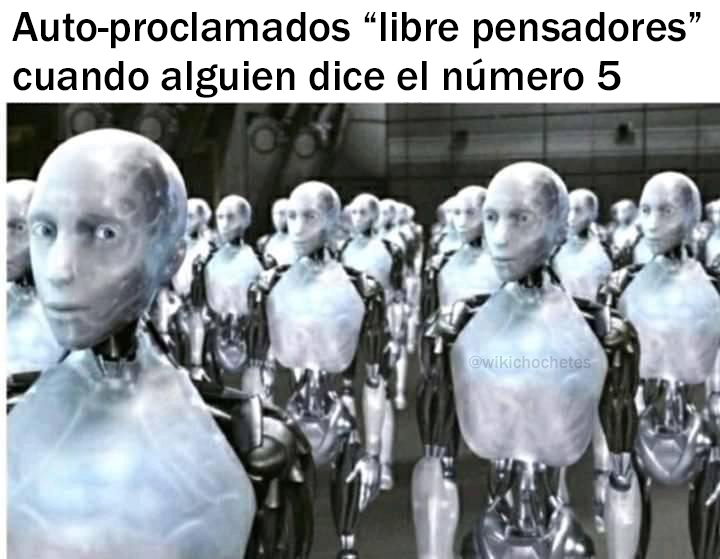
<style>
.page{position:relative;width:720px;height:559px}
.page>*{position:absolute;margin:0}
.t1{font:43.5px "FranklinGothic-Medium";color:#000000}
.t2{font:18px "FranklinGothic-Medium";color:#adc1d0}
</style>
<div class="page">
<p class="t1" style="left:12px;top:12px;width:689px;height:86px">Auto-proclamados “libre pensadores”<br>cuando alguien dice el número 5</p>
<p class="t2" style="left:469px;top:355px;width:122px;height:14px">@wikichochetes</p>
</div>
